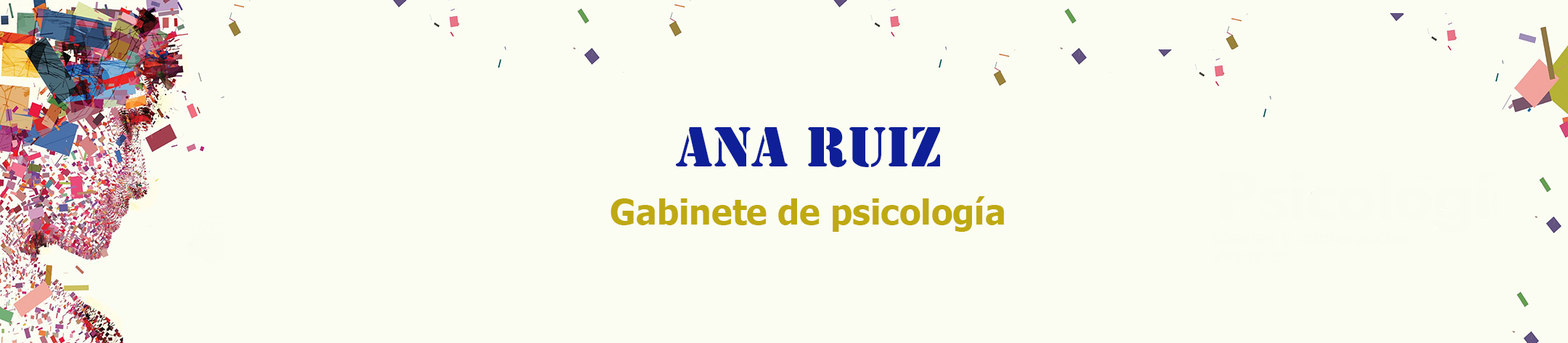
<style>
.page{position:relative;width:1568px;height:343px;background:#fbfdf2}
.page>*{position:absolute;margin:0}
.t1{font:52.3px "StencilStd";color:#0e1f98}
.t2{font:34.8px "Tahoma-Bold";color:#bfa913}
</style>
<div class="page">
<p class="t1" style="left:676px;top:127px;width:264px;height:40px">ANA RUIZ</p>
<p class="t2" style="left:611px;top:196px;width:393px;height:36px">Gabinete de psicología</p>
</div>
